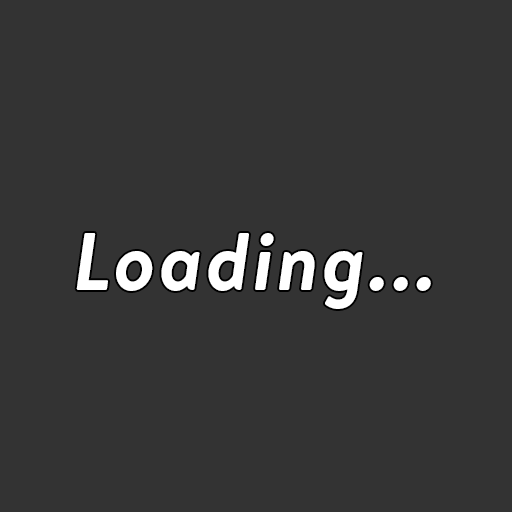
<style>
.page{position:relative;width:512px;height:512px;background:#333333}
.page>*{position:absolute;margin:0}
.t1{font:82px "Bogle-BoldItalic";letter-spacing:0.04em;color:#ffffff}
</style>
<div class="page">
<p class="t1" style="left:76px;top:233px;width:355px;height:76px">Loading...</p>
</div>
